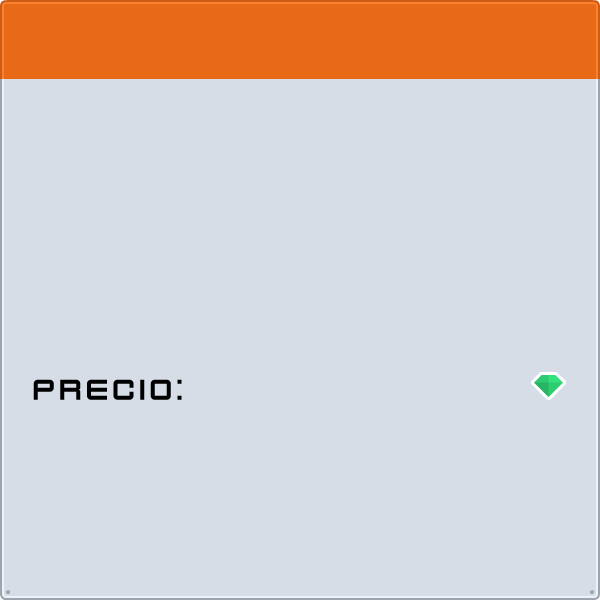
<style>
.page{position:relative;width:600px;height:600px;background:#d6dde7}
.page>*{position:absolute;margin:0}
.t1{font:32px "KenVector-Future";color:#000000}
</style>
<div class="page">
<p class="t1" style="left:33px;top:379px;width:149px;height:21px">precio:</p>
</div>
